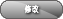
<style>
.page{position:relative;width:63px;height:19px}
.page>*{position:absolute;margin:0}
.t1{font:8.1px "KozGoPr6N-Regular";letter-spacing:0.12em;color:#ffffff;font-weight:bold;scale:0.79 1}
</style>
<div class="page">
<p class="t1" style="left:24px;top:4px;width:15px;height:10px">修改</p>
</div>
